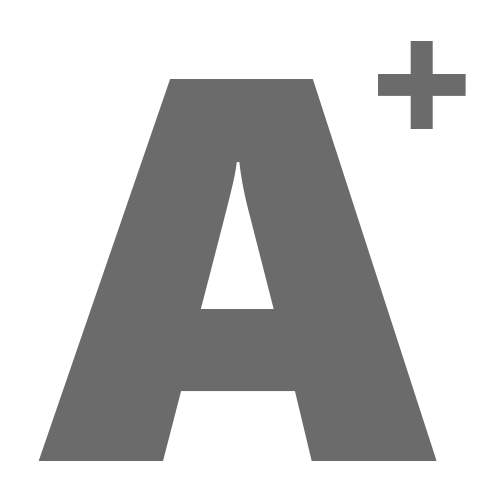
<style>
.page{position:relative;width:500px;height:500px;background:#ffffff}
.page>*{position:absolute;margin:0}
.t1{font:43.5px "SegoeUIBlack";color:#6b6b6b}
.t2{font:130.8px "SegoeUIBlack";color:#6b6b6b}
</style>
<div class="page">
<p class="t1" style="left:378px;top:41px;width:88px;height:88px">+</p>
<p class="t2" style="left:38px;top:79px;width:399px;height:382px">A</p>
</div>
